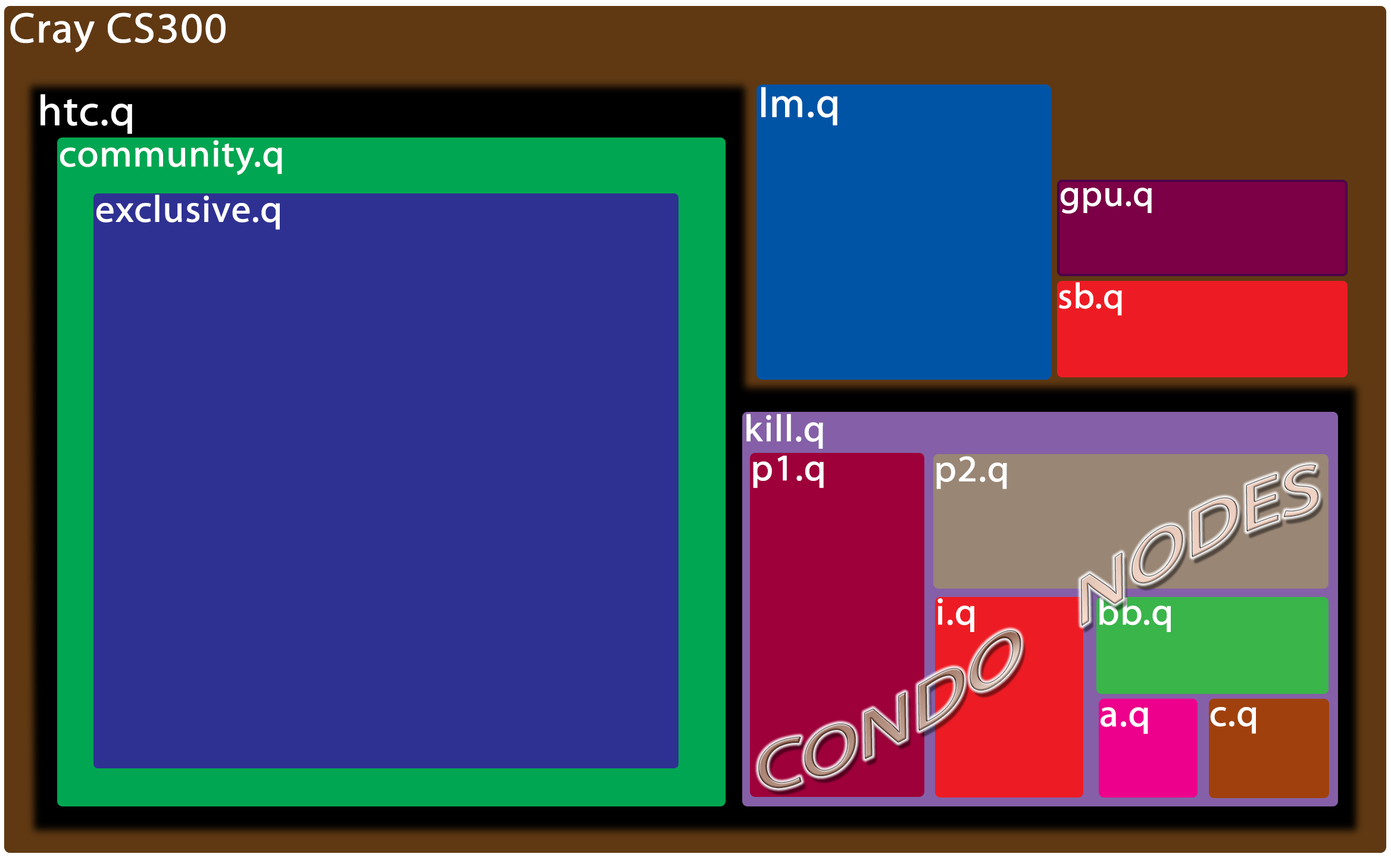
<style>
.page{position:relative;width:1391px;height:857px;background:#2e3192}
.page>*{position:absolute;margin:0}
.t1{font:42.9px "Myriad-Web";color:#ffffff;font-weight:bold}
.t2{font:41.4px "Myriad-Web";color:#ffffff;font-weight:bold}
.t3{font:37.6px "Myriad-Web";color:#ffffff;font-weight:bold}
.t4{font:35.8px "Myriad-Web";color:#ffffff;font-weight:bold}
</style>
<div class="page">
<p class="t1" style="left:10px;top:13px;width:216px;height:39px">Cray CS300</p>
<p class="t2" style="left:761px;top:87px;width:77px;height:39px">lm.q</p>
<p class="t1" style="left:40px;top:94px;width:92px;height:40px">htc.q</p>
<p class="t3" style="left:60px;top:140px;width:222px;height:35px">community.q</p>
<p class="t3" style="left:96px;top:195px;width:184px;height:35px">exclusive.q</p>
<p class="t4" style="left:1061px;top:188px;width:91px;height:26px">gpu.q</p>
<p class="t4" style="left:1059px;top:282px;width:63px;height:33px">sb.q</p>
<p class="t3" style="left:746px;top:414px;width:77px;height:35px">kill.q</p>
<p class="t3" style="left:753px;top:455px;width:71px;height:33px">p1.q</p>
<p class="t3" style="left:936px;top:456px;width:71px;height:33px">p2.q</p>
<p class="t3" style="left:938px;top:598px;width:36px;height:34px">i.q</p>
<p class="t3" style="left:1099px;top:598px;width:72px;height:34px">bb.q</p>
<p class="t3" style="left:1101px;top:707px;width:47px;height:27px">a.q</p>
<p class="t3" style="left:1210px;top:707px;width:47px;height:27px">c.q</p>
</div>
